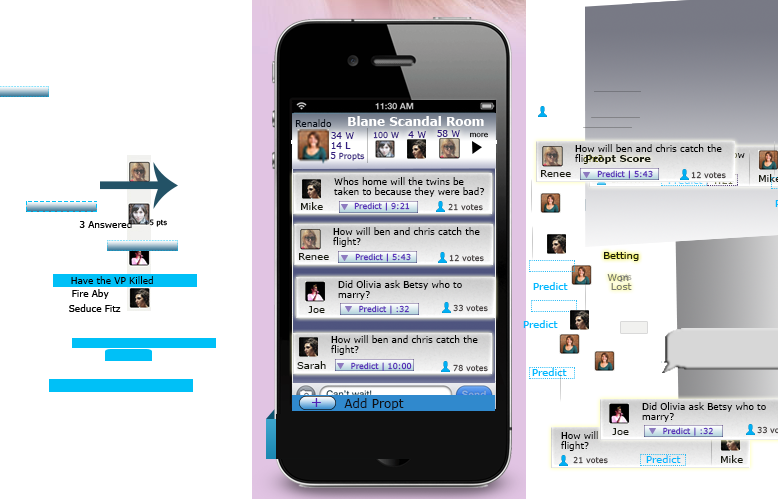
<style>
.page{position:relative;width:778px;height:499px;background:#ffffff}
.page>*{position:absolute;margin:0}
.t1{font:9px "Verdana";color:#050c17}
.t2{font:12px "Verdana-Bold";color:#ffffff}
.t3{font:9px "Verdana";color:#341d80}
.t4{font:8px "Verdana"}
.t5{font:9px "Verdana"}
.t6{font:7px "Verdana"}
.t7{font:9px "Verdana";color:#000000}
.t8{font:8px "Verdana";color:#341d80}
.t9{font:10px "Verdana-Bold";color:#181a0f}
.t10{font:10px "Verdana";color:#181a0f}
.t11{font:8px "Verdana";color:#3f3939}
.t12{font:10px "Verdana";color:#797a72}
.t13{font:10px "TimesNewRomanPSMT";color:#acacac}
.t14{font:10px "Verdana";color:#03b8ff}
.t15{font:10px "Verdana";color:#797a74}
.t16{font:8px "Verdana";color:#511fb6}
.t17{font:14px "Verdana";color:#511fb6}
.t18{font:12px "Verdana";color:#0f0e12}
</style>
<div class="page">
<p class="t1" style="left:295px;top:119px;width:37px;height:8px">Renaldo</p>
<p class="t2" style="left:348px;top:116px;width:136px;height:10px">Blane Scandal Room</p>
<p class="t3" style="left:331px;top:132px;width:23px;height:7px">34 W</p>
<p class="t4" style="left:373px;top:131px;width:26px;height:8px"><span class="t5"><br></span>  100 W</p>
<p class="t3" style="left:408px;top:131px;width:18px;height:7px">4 W</p>
<p class="t3" style="left:437px;top:130px;width:23px;height:7px">58 W</p>
<p class="t6" style="left:470px;top:132px;width:18px;height:6px">more</p>
<p class="t3" style="left:331px;top:142px;width:20px;height:7px">14 L</p>
<p class="t7" style="left:575px;top:144px;width:147px;height:20px">How will ben and chris catch the flight?</p>
<p class="t8" style="left:330px;top:152px;width:35px;height:9px"><span class="t3"><br>5</span> Propts</p>
<p class="t9" style="left:586px;top:155px;width:65px;height:9px">Propt Score</p>
<p class="t10" style="left:541px;top:170px;width:30px;height:7px">Renee</p>
<p class="t4" style="left:597px;top:170px;width:56px;height:9px">Predict | 5:43</p>
<p class="t11" style="left:691px;top:171px;width:35px;height:8px">12 votes</p>
<p class="t7" style="left:334px;top:177px;width:151px;height:20px">Whos home will the twins be taken to because they were bad?</p>
<p class="t5" style="left:711px;top:177px;width:22px;height:7px">4:21</p>
<p class="t10" style="left:301px;top:202px;width:22px;height:8px">Mike</p>
<p class="t4" style="left:354px;top:202px;width:56px;height:9px">Predict | 9:21</p>
<p class="t11" style="left:448px;top:203px;width:35px;height:8px">21 votes</p>
<p class="t7" style="left:79px;top:220px;width:53px;height:8px">3 Answered</p>
<p class="t6" style="left:144px;top:219px;width:23px;height:8px">+5 pts</p>
<p class="t7" style="left:333px;top:227px;width:147px;height:20px">How will ben and chris catch the flight?</p>
<p class="t10" style="left:299px;top:253px;width:30px;height:7px">Renee</p>
<p class="t4" style="left:355px;top:253px;width:56px;height:9px">Predict | 5:43</p>
<p class="t11" style="left:449px;top:254px;width:35px;height:8px">12 votes</p>
<p class="t10" style="left:604px;top:252px;width:35px;height:9px">Betting</p>
<p class="t7" style="left:71px;top:276px;width:82px;height:8px">Have the VP Killed</p>
<p class="t7" style="left:338px;top:280px;width:124px;height:20px">Did Olivia ask Betsy who to marry?</p>
<p class="t12" style="left:607px;top:274px;width:22px;height:7px">Won</p>
<p class="t13" style="left:619px;top:274px;width:13px;height:8px">pts</p>
<p class="t7" style="left:72px;top:289px;width:37px;height:10px">Fire Aby</p>
<p class="t14" style="left:533px;top:282px;width:35px;height:8px">Predict</p>
<p class="t15" style="left:611px;top:283px;width:21px;height:7px">Lost</p>
<p class="t7" style="left:69px;top:304px;width:52px;height:8px">Seduce Fitz</p>
<p class="t16" style="left:359px;top:305px;width:50px;height:9px">Predict | :32</p>
<p class="t11" style="left:453px;top:304px;width:35px;height:8px">33 votes</p>
<p class="t10" style="left:308px;top:306px;width:17px;height:7px">Joe</p>
<p class="t14" style="left:523px;top:320px;width:35px;height:8px">Predict</p>
<p class="t7" style="left:331px;top:335px;width:147px;height:20px">How will ben and chris catch the flight?</p>
<p class="t10" style="left:297px;top:361px;width:29px;height:8px">Sarah</p>
<p class="t16" style="left:351px;top:362px;width:61px;height:9px">Predict | 10:00</p>
<p class="t11" style="left:453px;top:364px;width:35px;height:8px">78 votes</p>
<p class="t14" style="left:532px;top:368px;width:35px;height:8px">Predict</p>
<p class="t17" style="left:312px;top:398px;width:9px;height:9px">+</p>
<p class="t18" style="left:344px;top:398px;width:60px;height:12px">Add Propt</p>
<p class="t7" style="left:642px;top:402px;width:124px;height:20px">Did Olivia ask Betsy who to marry?</p>
<p class="t5" style="left:561px;top:431px;width:147px;height:20px">How will ben and chris catch the flight?</p>
<p class="t10" style="left:612px;top:428px;width:17px;height:7px">Joe</p>
<p class="t16" style="left:663px;top:427px;width:50px;height:9px">Predict | :32</p>
<p class="t11" style="left:573px;top:456px;width:35px;height:8px">21 votes</p>
<p class="t14" style="left:646px;top:455px;width:35px;height:8px">Predict</p>
<p class="t10" style="left:721px;top:455px;width:22px;height:8px">Mike</p>
</div>
